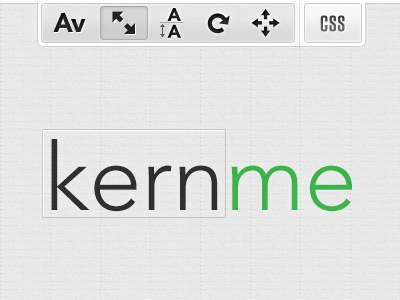
<style>
.page{position:relative;width:400px;height:300px;background:#eaeaea}
.page>*{position:absolute;margin:0}
.t1{font:93.9px "AvenirLTStd-Light";color:#2f2f2f}
.t2{font:93.9px "AvenirLTStd-Light";color:#39b54a}
</style>
<div class="page">
<p class="t1" style="left:51px;top:139px;width:301px;height:73px">kern<span class="t2">me</span></p>
</div>
